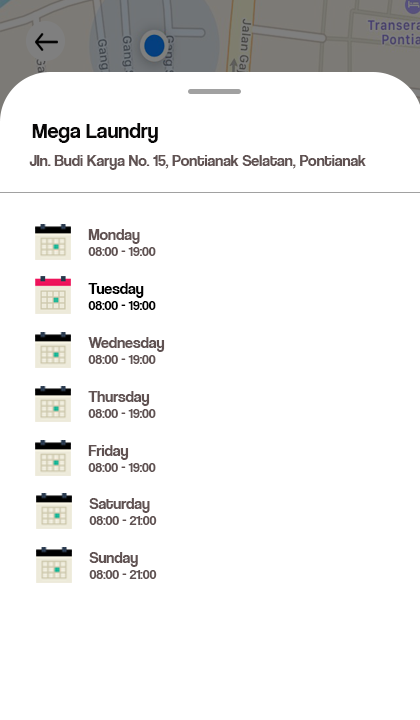
<style>
.page{position:relative;width:420px;height:720px;background:#ffffff}
.page>*{position:absolute;margin:0}
.t1{font:22px "CoolveticaRg-Regular";color:#080707}
.t2{font:16px "CoolveticaRg-Regular";color:#605252}
.t3{font:14px "CoolveticaRg-Regular";color:#605252}
.t4{font:14px "CoolveticaRg-Regular";color:#000000}
.t5{font:16px "CoolveticaRg-Regular";color:#000000}
</style>
<div class="page">
<p class="t1" style="left:32px;top:123px;width:126px;height:20px">Mega Laundry</p>
<p class="t2" style="left:29px;top:155px;width:337px;height:15px">Jln. Budi Karya No. 15, Pontianak Selatan, Pontianak</p>
<p class="t3" style="left:88px;top:229px;width:68px;height:27px"><span class="t2">Monday<br></span>08:00 - 19:00</p>
<p class="t4" style="left:88px;top:283px;width:68px;height:27px"><span class="t5">Tuesday<br></span>08:00 - 19:00</p>
<p class="t3" style="left:88px;top:337px;width:77px;height:27px"><span class="t2">Wednesday<br></span>08:00 - 19:00</p>
<p class="t3" style="left:88px;top:391px;width:68px;height:27px"><span class="t2">Thursday<br></span>08:00 - 19:00</p>
<p class="t3" style="left:88px;top:445px;width:68px;height:27px"><span class="t2">Friday<br></span>08:00 - 19:00</p>
<p class="t3" style="left:89px;top:498px;width:68px;height:27px"><span class="t2">Saturday<br></span>08:00 - 21:00</p>
<p class="t3" style="left:89px;top:552px;width:68px;height:27px"><span class="t2">Sunday<br></span>08:00 - 21:00</p>
</div>
